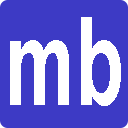
<style>
.page{position:relative;width:128px;height:128px;background:#3d3ac5}
.page>*{position:absolute;margin:0}
.t1{font:121.9px "Arial-BoldMT";color:#ffffff;scale:0.64 1}
</style>
<div class="page">
<p class="t1" style="left:10px;top:17px;width:111px;height:89px">mb</p>
</div>
